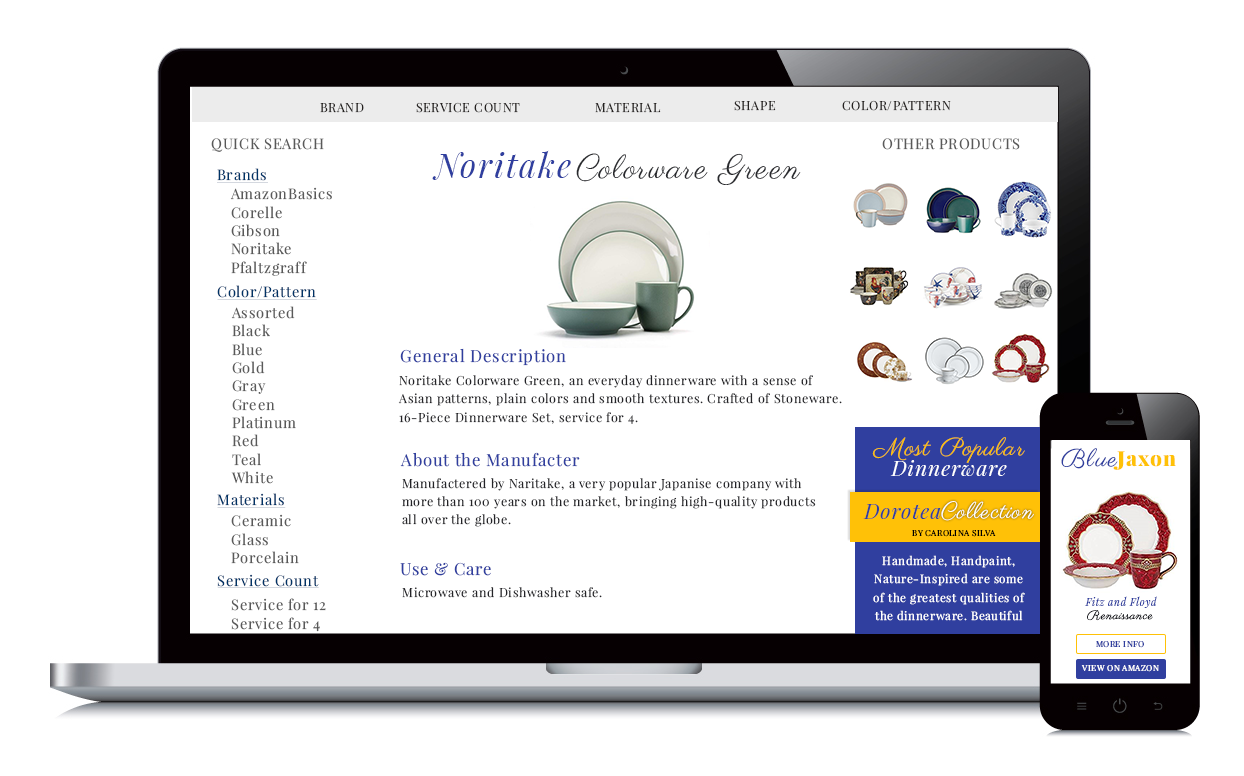
<style>
.page{position:relative;width:1244px;height:776px;background:#ffffff}
.page>*{position:absolute;margin:0}
.t1{font:12.5px "PlayfairDisplay-Regular";letter-spacing:0.05em;color:#242120}
.t2{font:14.6px "PlayfairDisplay-Regular";letter-spacing:0.05em;color:#595959}
.t3{font:33.3px "PlayfairDisplay-Italic";letter-spacing:0.05em;color:#303f9f}
.t4{font:33.3px "Parisienne-Regular";letter-spacing:0.05em;color:#28292d}
.t5{font:14.6px "PlayfairDisplay-Regular";letter-spacing:0.05em;color:#003366;text-decoration:underline}
.t6{font:14.6px/18.3px "PlayfairDisplay-Regular";letter-spacing:0.05em;color:#595959}
.t7{font:16.7px "PlayfairDisplay-Regular";letter-spacing:0.05em;color:#303f9f}
.t8{font:12.5px/18.3px "PlayfairDisplay-Regular";letter-spacing:0.05em;color:#242428}
.t9{font:25px "Parisienne-Regular";letter-spacing:0.05em;color:#ffc107}
.t10{font:25px "Parisienne-Regular";letter-spacing:0.05em;color:#303f9f}
.t11{font:20.8px "PlayfairDisplay-Italic";letter-spacing:0.05em;color:#ffffff}
.t12{font:20.8px "PlayfairDisplay-Black";letter-spacing:0.05em;color:#ffc107}
.t13{font:20.8px "PlayfairDisplay-Italic";letter-spacing:0.05em;color:#303f9f}
.t14{font:22.9px "Parisienne-Regular";letter-spacing:0.05em;color:#ffffff}
.t15{font:8.3px "PlayfairDisplay-Regular";letter-spacing:0.05em;color:#000000}
.t16{font:11.7px/18.3px "PlayfairDisplay-Regular";letter-spacing:0.05em;color:#ffffff}
.t17{font:12.5px "PlayfairDisplay-Regular";letter-spacing:0.05em;color:#242428}
.t18{font:10.4px "PlayfairDisplay-Italic";letter-spacing:0.05em;color:#303f9f}
.t19{font:12.5px "Parisienne-Regular";letter-spacing:0.05em;color:#212227}
.t20{font:8.3px "PlayfairDisplay-Regular";letter-spacing:0.05em;color:#303f9f}
.t21{font:8.3px "PlayfairDisplay-Regular";letter-spacing:0.05em;color:#ffffff}
</style>
<div class="page">
<p class="t1" style="left:416px;top:102px;width:104px;height:11px">SERVICE COUNT</p>
<p class="t1" style="left:734px;top:100px;width:42px;height:11px">SHAPE</p>
<p class="t1" style="left:842px;top:100px;width:109px;height:11px">COLOR/PATTERN</p>
<p class="t1" style="left:320px;top:103px;width:44px;height:10px">BRAND</p>
<p class="t1" style="left:595px;top:103px;width:66px;height:10px">MATERIAL</p>
<p class="t2" style="left:211px;top:138px;width:113px;height:14px">QUICK SEARCH</p>
<p class="t3" style="left:432px;top:150px;width:139px;height:30px">Noritake</p>
<p class="t2" style="left:882px;top:138px;width:138px;height:12px">OTHER PRODUCTS</p>
<p class="t4" style="left:576px;top:153px;width:225px;height:32px">Colorware Green</p>
<p class="t5" style="left:217px;top:168px;width:51px;height:15px">Brands</p>
<p class="t6" style="left:230px;top:187px;width:102px;height:89px">AmazonBasics<br>Corelle<br>Gibson<br>Noritake<br>Pfaltzgraff</p>
<p class="t5" style="left:217px;top:285px;width:100px;height:15px">Color/Pattern</p>
<p class="t6" style="left:231px;top:306px;width:65px;height:178px">Assorted<br>Black<br>Blue<br>Gold<br>Gray<br>Green<br>Platinum<br>Red<br>Teal<br>White</p>
<p class="t7" style="left:400px;top:348px;width:166px;height:18px">General Description</p>
<p class="t8" style="left:398px;top:375px;width:444px;height:49px">Noritake Colorware Green, an everyday dinnerware with a sense of <br>Asian patterns, plain colors and smooth textures. Crafted of Stoneware.<br>16-Piece Dinnerware Set, service for 4.</p>
<p class="t9" style="left:872px;top:436px;width:153px;height:28px">Most Popular</p>
<p class="t10" style="left:1061px;top:448px;width:57px;height:21px">Blue</p>
<p class="t7" style="left:400px;top:452px;width:180px;height:15px">About the Manufacter</p>
<p class="t11" style="left:890px;top:460px;width:117px;height:16px">Dinnerware</p>
<p class="t12" style="left:1113px;top:451px;width:63px;height:19px">Jaxon</p>
<p class="t8" style="left:402px;top:478px;width:414px;height:49px">Manufactered by Naritake, a very popular Japanise company with <br>more than 100 years on the market, bringing high-quality products<br>all over the globe.</p>
<p class="t5" style="left:217px;top:493px;width:69px;height:15px">Materials</p>
<p class="t13" style="left:863px;top:504px;width:78px;height:15px">Dorotea</p>
<p class="t14" style="left:941px;top:501px;width:93px;height:20px">Collection</p>
<p class="t6" style="left:231px;top:514px;width:68px;height:50px">Ceramic<br>Glass<br>Porcelain</p>
<p class="t15" style="left:912px;top:530px;width:84px;height:7px">BY CAROLINA SILVA</p>
<p class="t16" style="left:873px;top:555px;width:152px;height:66px;text-align:center">Handmade, Handpaint, Nature-Inspired are some of the greatest qualities of the dinnerware. Beautiful</p>
<p class="t7" style="left:400px;top:562px;width:91px;height:14px">Use &amp; Care</p>
<p class="t5" style="left:217px;top:574px;width:102px;height:14px">Service Count</p>
<p class="t17" style="left:402px;top:587px;width:200px;height:11px">Microwave and Dishwasher safe.</p>
<p class="t6" style="left:231px;top:598px;width:95px;height:34px">Service for 12<br>Service for 4</p>
<p class="t18" style="left:1085px;top:596px;width:72px;height:12px">Fitz and Floyd</p>
<p class="t19" style="left:1087px;top:610px;width:66px;height:11px">Renaissance</p>
<p class="t20" style="left:1096px;top:641px;width:48px;height:7px">MORE INFO</p>
<p class="t21" style="left:1081px;top:665px;width:78px;height:7px">VIEW ON AMAZON</p>
</div>
